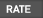
<style>
.page{position:relative;width:43px;height:18px;background:#555555}
.page>*{position:absolute;margin:0}
.t1{font:10px "HCRDotum-Bold";color:#ffffff}
</style>
<div class="page">
<p class="t1" style="left:6px;top:5px;width:25px;height:8px">RATE</p>
</div>
